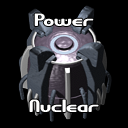
<style>
.page{position:relative;width:128px;height:128px;background:#000000}
.page>*{position:absolute;margin:0}
.t1{font:18px "GravitateBRK";color:#ffffff}
</style>
<div class="page">
<p class="t1" style="left:34px;top:13px;width:60px;height:13px">Power</p>
<p class="t1" style="left:29px;top:99px;width:70px;height:13px">Nuclear</p>
</div>
